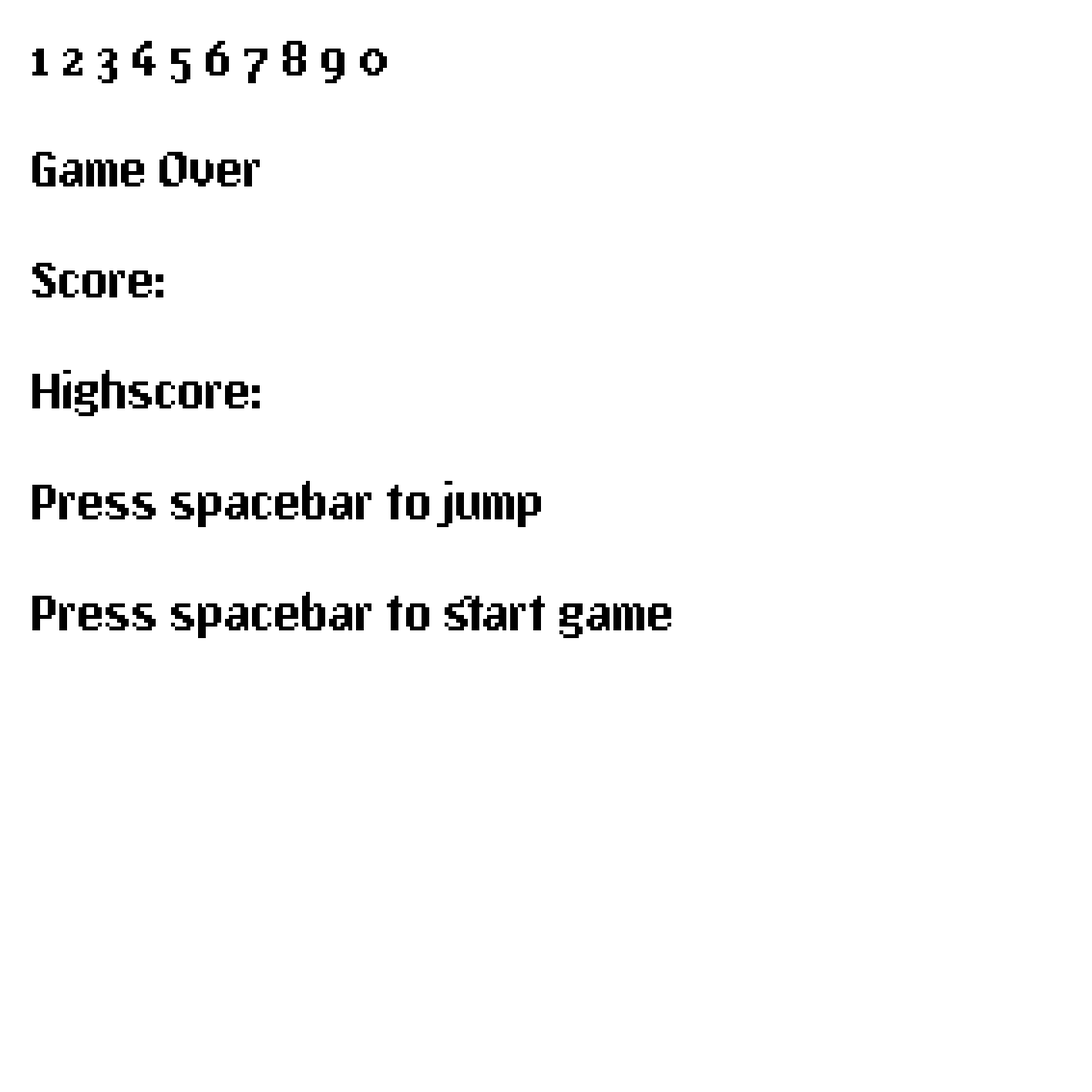
<style>
.page{position:relative;width:1092px;height:1092px;background:#ffffff}
.page>*{position:absolute;margin:0}
.t1{font:46.2px "PixAntiqua";color:#000000}
</style>
<div class="page">
<p class="t1" style="left:32px;top:41px;width:639px;height:597px">1 2 3 4 5 6 7 8 9 0<br><br>Game Over<br><br>Score:<br><br>Highscore:<br><br>Press spacebar to jump<br><br>Press spacebar to start game</p>
</div>
